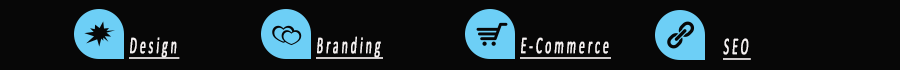
<style>
.page{position:relative;width:900px;height:70px;background:#070707}
.page>*{position:absolute;margin:0}
.t1{font:24px "Calibri";letter-spacing:0.25em;color:#f7f3f3;font-weight:bold;font-style:italic;text-decoration:underline;scale:0.47 1}
</style>
<div class="page">
<p class="t1" style="left:129px;top:37px;width:51px;height:22px">Design</p>
<p class="t1" style="left:316px;top:36px;width:67px;height:23px">Branding</p>
<p class="t1" style="left:520px;top:37px;width:91px;height:22px">E-Commerce</p>
<p class="t1" style="left:723px;top:38px;width:28px;height:22px">SEO</p>
</div>
